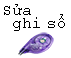
<style>
.page{position:relative;width:71px;height:58px;background:#ffffff}
.page>*{position:absolute;margin:0}
.t1{font:12px/13.3px "CourierNewPSMT";color:#000000}
</style>
<div class="page">
<p class="t1" style="left:4px;top:4px;width:61px;height:27px">Sửa<br> ghi sổ</p>
</div>
